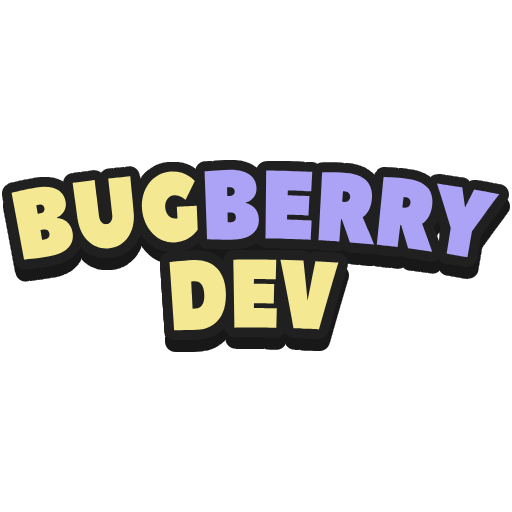
<style>
.page{position:relative;width:512px;height:512px;background:#ffffff}
.page>*{position:absolute;margin:0}
.t1{font:97.2px "PeaceSans";color:#f5e892;text-transform:uppercase;scale:0.77 1}
.t2{font:97.2px "PeaceSans";color:#aca3f6;text-transform:uppercase;scale:0.77 1}
</style>
<div class="page">
<p class="t1" style="left:11px;top:169px;width:489px;height:162px;text-align:center">Bug<span class="t2">b</span><span class="t2">e</span><span class="t2">rry<br></span>Dev</p>
</div>
